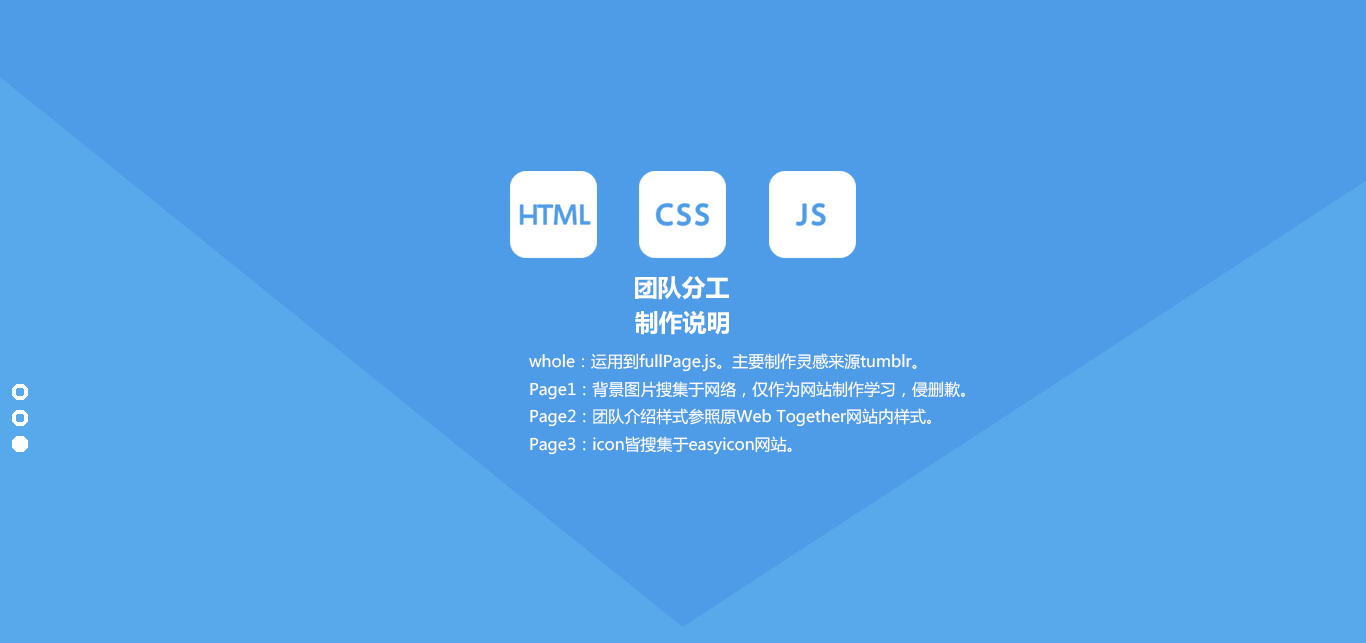
<style>
.page{position:relative;width:1366px;height:643px;background:#4e9be8}
.page>*{position:absolute;margin:0}
.t1{font:24px "MicrosoftYaHei-Bold";color:#ffffff}
.t2{font:16px "MicrosoftYaHei";color:#ffffff}
</style>
<div class="page">
<p class="t1" style="left:635px;top:276px;width:94px;height:24px">团队分工</p>
<p class="t1" style="left:635px;top:311px;width:94px;height:24px">制作说明</p>
<p class="t2" style="left:529px;top:353px;width:388px;height:19px">whole：运用到fullPage.js。主要制作灵感来源tumblr。</p>
<p class="t2" style="left:530px;top:381px;width:435px;height:19px">Page1：背景图片搜集于网络，仅作为网站制作学习，侵删歉。</p>
<p class="t2" style="left:530px;top:408px;width:401px;height:19px">Page2：团队介绍样式参照原Web Together网站内样式。</p>
<p class="t2" style="left:530px;top:436px;width:262px;height:19px">Page3：icon皆搜集于easyicon网站。</p>
</div>
